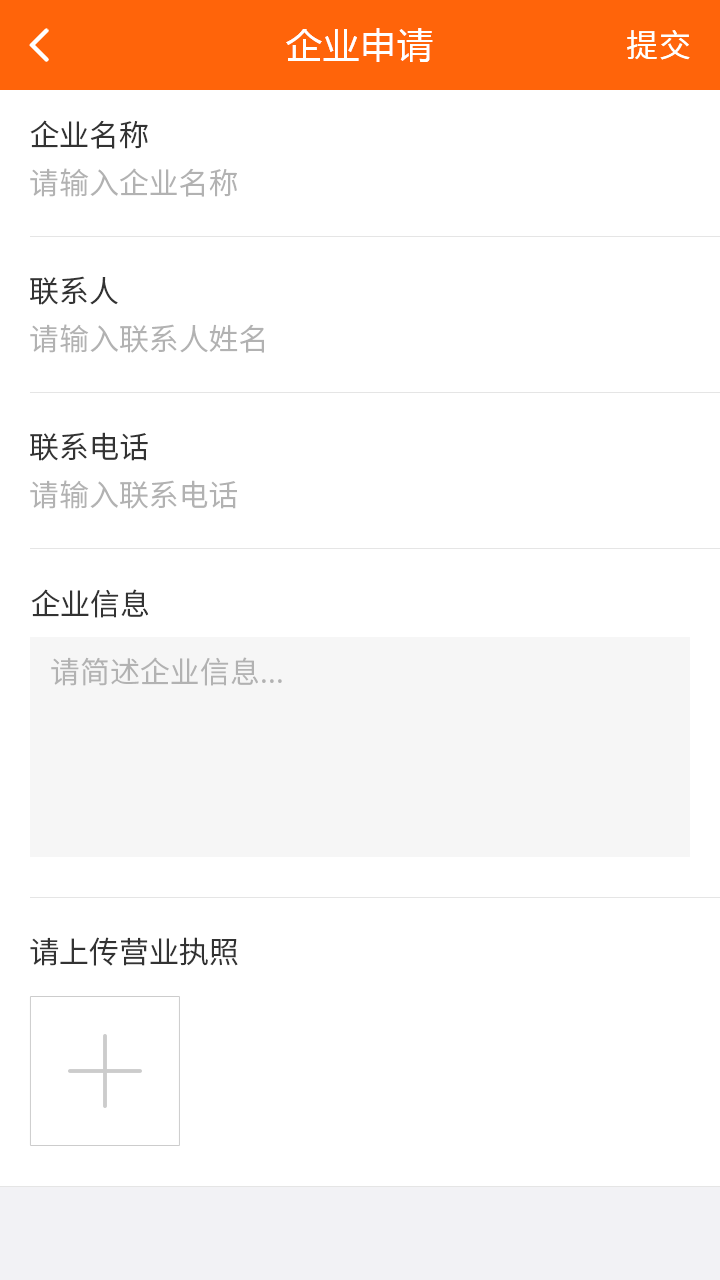
<style>
.page{position:relative;width:720px;height:1280px;background:#ffffff}
.page>*{position:absolute;margin:0}
.t1{font:36px "MicrosoftYaHei";letter-spacing:0.03em;color:#ffffff}
.t2{font:32px "NotoSansCJKsc-Regular";letter-spacing:0.03em;color:#ffffff;font-variant:small-caps}
.t3{font:30px "NotoSansCJKsc-DemiLight";color:#333333}
.t4{font:30px "NotoSansCJKsc-DemiLight";color:#b2b2b2}
</style>
<div class="page">
<p class="t1" style="left:286px;top:28px;width:147px;height:34px">企业申请</p>
<p class="t2" style="left:627px;top:30px;width:63px;height:30px">提交</p>
<p class="t3" style="left:30px;top:120px;width:118px;height:29px">企业名称</p>
<p class="t4" style="left:30px;top:168px;width:207px;height:29px">请输入企业名称</p>
<p class="t3" style="left:30px;top:276px;width:88px;height:29px">联系人</p>
<p class="t4" style="left:30px;top:324px;width:234px;height:29px">请输入联系人姓名</p>
<p class="t3" style="left:30px;top:432px;width:118px;height:29px">联系电话</p>
<p class="t4" style="left:30px;top:480px;width:207px;height:29px">请输入联系电话</p>
<p class="t3" style="left:31px;top:589px;width:118px;height:29px">企业信息</p>
<p class="t4" style="left:51px;top:657px;width:231px;height:29px">请简述企业信息...</p>
<p class="t3" style="left:30px;top:937px;width:208px;height:29px">请上传营业执照</p>
</div>
